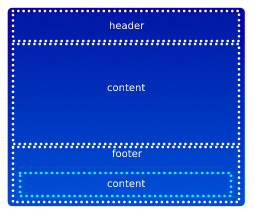
<style>
.page{position:relative;width:255px;height:214px}
.page>*{position:absolute;margin:0}
.t1{font:10px "DejaVuSans";color:#ffffff}
</style>
<div class="page">
<p class="t1" style="left:109px;top:21px;width:36px;height:9px">header</p>
<p class="t1" style="left:107px;top:83px;width:39px;height:9px">content</p>
<p class="t1" style="left:112px;top:149px;width:30px;height:9px">footer</p>
<p class="t1" style="left:107px;top:179px;width:39px;height:9px">content</p>
</div>
